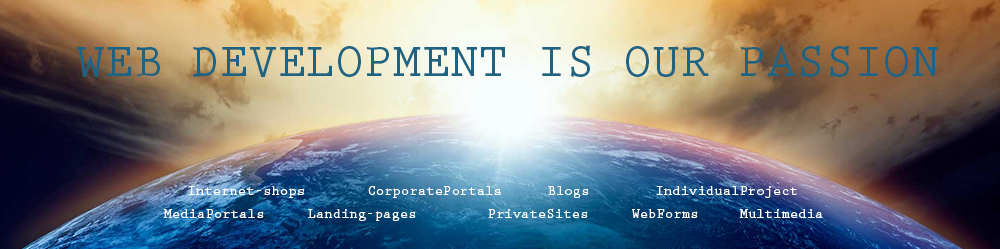
<style>
.page{position:relative;width:1000px;height:249px}
.page>*{position:absolute;margin:0}
.t1{font:48px "PrestigeEliteStd-Bd";color:#1e6482}
.t2{font:14px "PrestigeEliteStd-Bd";color:#ffffff}
</style>
<div class="page">
<p class="t1" style="left:77px;top:44px;width:861px;height:33px">WEB DEVELOPMENT IS OUR PASSION</p>
<p class="t2" style="left:188px;top:186px;width:609px;height:12px">Internet-shops  CorporatePortals  Blogs  IndividualProject</p>
<p class="t2" style="left:163px;top:208px;width:660px;height:13px">MediaPortals  Landing-pages  PrivateSites  WebForms  Multimedia</p>
</div>
